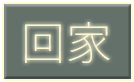
<style>
.page{position:relative;width:134px;height:82px;background:#64706a}
.page>*{position:absolute;margin:0}
.t1{font:45.8px "YuGothicUI-Light";color:#fff5d3}
</style>
<div class="page">
<p class="t1" style="left:25px;top:22px;width:85px;height:41px">回家</p>
</div>
